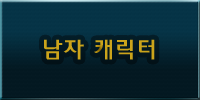
<style>
.page{position:relative;width:200px;height:100px}
.page>*{position:absolute;margin:0}
.t1{font:24px "2002L";letter-spacing:0.05em;color:#cba41b}
</style>
<div class="page">
<p class="t1" style="left:44px;top:39px;width:111px;height:21px">남자 캐릭터</p>
<p class="t1" style="left:44px;top:39px;width:111px;height:21px">남자 캐릭터</p>
</div>
